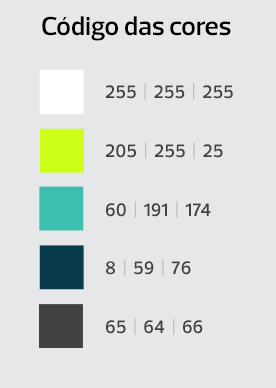
<style>
.page{position:relative;width:276px;height:388px;background:#e6e7e8}
.page>*{position:absolute;margin:0}
.t1{font:26.7px "Prelo-SemiBold";color:#000000}
.t2{font:18.7px "Prelo-SemiBold";color:#414042}
.t3{font:18.7px "Prelo-SemiBold";color:#bcbec0}
</style>
<div class="page">
<p class="t1" style="left:42px;top:16px;width:189px;height:25px">Código das cores</p>
<p class="t2" style="left:106px;top:83px;width:127px;height:17px">255  <span class="t3">| </span> 255 <span class="t3"> |</span>  255</p>
<p class="t2" style="left:106px;top:142px;width:117px;height:17px">205  <span class="t3">| </span> 255 <span class="t3"> |</span>  25</p>
<p class="t2" style="left:106px;top:201px;width:105px;height:17px">60  <span class="t3">| </span> 191  <span class="t3">|</span>  174</p>
<p class="t2" style="left:106px;top:259px;width:85px;height:17px">8  <span class="t3">| </span> 59  <span class="t3">|</span>  76</p>
<p class="t2" style="left:106px;top:318px;width:97px;height:17px">65  <span class="t3">| </span> 64  <span class="t3">|</span>  66</p>
</div>
